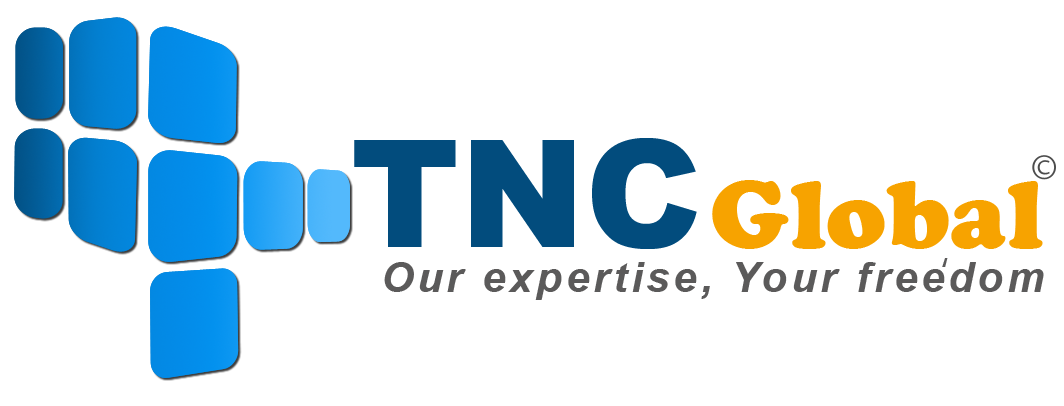
<style>
.page{position:relative;width:1064px;height:406px;background:#ffffff}
.page>*{position:absolute;margin:0}
.t1{font:150px "Arial-Black";color:#024c7d}
.t2{font:100px "CooperBlack";color:#f7a300}
.t3{font:41.7px "Arial-BoldItalicMT";letter-spacing:0.095em;color:#5b5a5a}
.t4{font:41.7px "Ebrima";letter-spacing:0.16em;color:#5b5a5a}
</style>
<div class="page">
<p class="t1" style="left:354px;top:138px;width:343px;height:111px">TNC</p>
<p class="t2" style="left:712px;top:180px;width:331px;height:69px">Global</p>
<p class="t3" style="left:384px;top:262px;width:660px;height:38px">Our expertise, Your freedom</p>
<p class="t4" style="left:942px;top:258px;width:6px;height:9px">‘</p>
</div>
